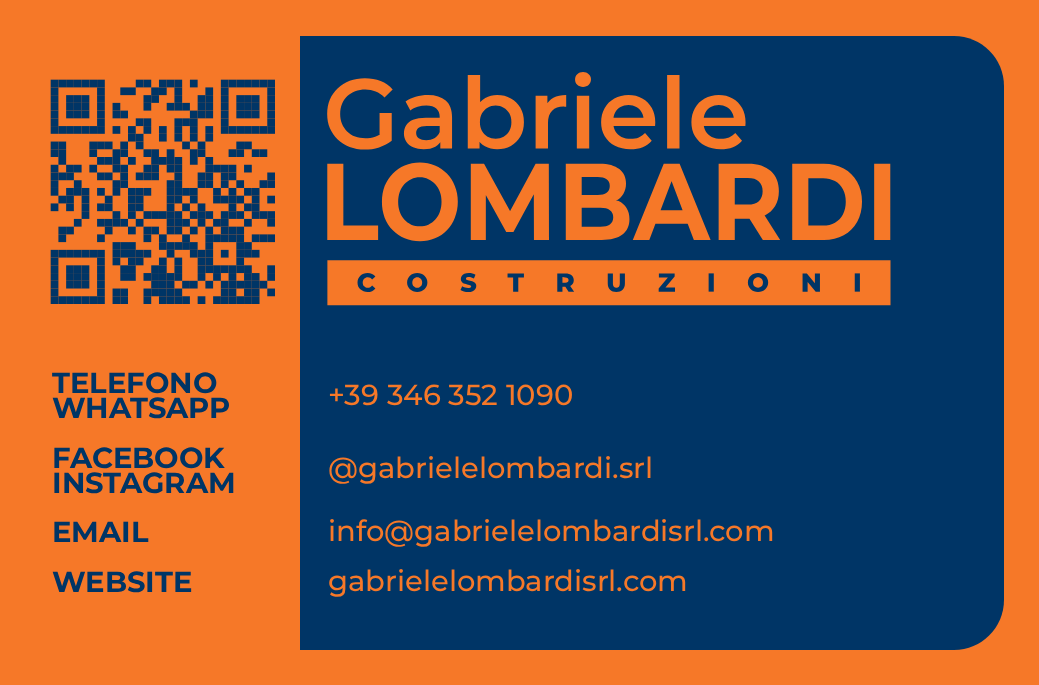
<style>
.page{position:relative;width:1039px;height:685px;background:#003566}
.page>*{position:absolute;margin:0}
.t1{font:29px/24.9px "Montserrat-Bold";color:#003566}
.t2{font:29px "Montserrat-Medium";color:#f67828}
</style>
<div class="page">
<p class="t1" style="left:52px;top:372px;width:182px;height:221px">TELEFONO<br>WHATSAPP<br><br>FACEBOOK<br>INSTAGRAM<br><br>EMAIL<br><br>WEBSITE</p>
<p class="t2" style="left:329px;top:384px;width:243px;height:22px">+39 346 352 1090</p>
<p class="t2" style="left:329px;top:456px;width:322px;height:28px">@gabrielelombardi.srl</p>
<p class="t2" style="left:330px;top:519px;width:443px;height:28px">info@gabrielelombardisrl.com</p>
<p class="t2" style="left:329px;top:569px;width:357px;height:28px">gabrielelombardisrl.com</p>
</div>
